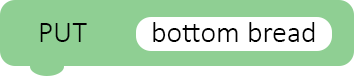
<style>
.page{position:relative;width:354px;height:76px;background:#8fcf93}
.page>*{position:absolute;margin:0}
.t1{font:30px "Calibri-Light";color:#000000}
</style>
<div class="page">
<p class="t1" style="left:40px;top:23px;width:47px;height:19px">PUT</p>
<p class="t1" style="left:153px;top:22px;width:162px;height:20px">bottom bread</p>
</div>
